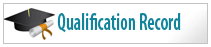
<style>
.page{position:relative;width:211px;height:47px;background:#ffffff}
.page>*{position:absolute;margin:0}
.t1{font:24px "MyriadPro-SemiboldCond";color:#11839a;scale:0.78 1}
</style>
<div class="page">
<p class="t1" style="left:57px;top:13px;width:124px;height:20px">Qualification Record</p>
</div>
